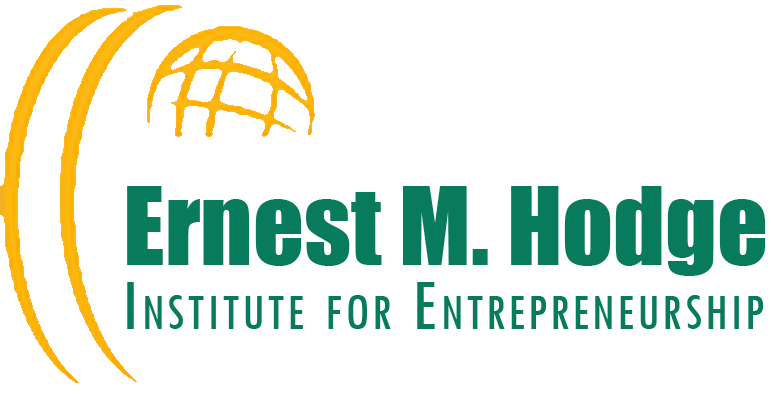
<style>
.page{position:relative;width:771px;height:396px;background:#ffffff}
.page>*{position:absolute;margin:0}
.t1{font:100px "Impact";color:#087b5d}
.t2{font:75px "TwCenMT-Condensed";letter-spacing:0.05em;color:#087b5d;font-variant:small-caps}
</style>
<div class="page">
<p class="t1" style="left:127px;top:186px;width:639px;height:90px">Ernest M. Hodge</p>
<p class="t2" style="left:127px;top:282px;width:637px;height:47px">Institute for Entrepreneurship</p>
</div>
